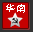
<style>
.page{position:relative;width:33px;height:32px;background:#c50000}
.page>*{position:absolute;margin:0}
.t1{font:10.4px "SimSun";color:#ffffff}
</style>
<div class="page">
<p class="t1" style="left:6px;top:4px;width:19px;height:9px">华南</p>
</div>
